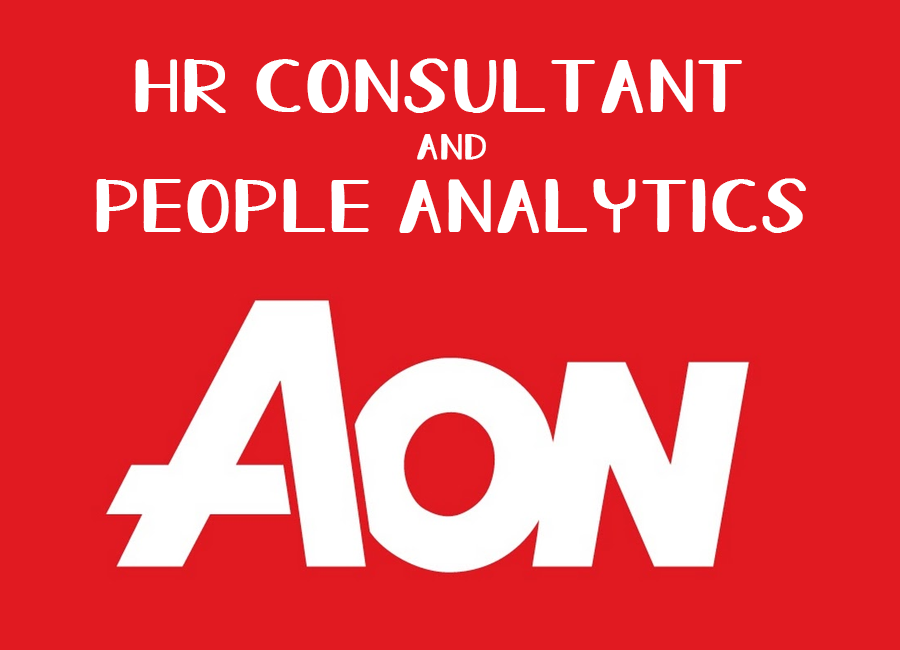
<style>
.page{position:relative;width:900px;height:650px;background:#e11a21}
.page>*{position:absolute;margin:0}
.t1{font:74.3px/72px "AllureOfTheSunRegular";letter-spacing:-0.025em;color:#ffffff;font-weight:bold;scale:1.25 1}
.t2{font:36px/48px "AllureOfTheSunRegular";letter-spacing:-0.025em;color:#ffffff;font-weight:bold;scale:1.25 1}
</style>
<div class="page">
<p class="t1" style="left:96px;top:58px;width:710px;height:175px;text-align:center">HR Consultant <br><span class="t2">AND<br></span>PEople Analytics</p>
</div>
